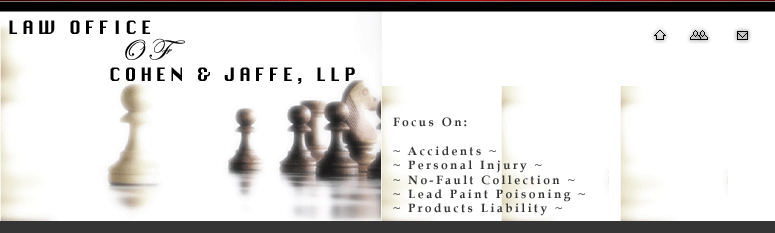
<style>
.page{position:relative;width:775px;height:233px;background:#ffffff}
.page>*{position:absolute;margin:0}
.t1{font:18px "Chicago";letter-spacing:0.2em;color:#000000}
.t2{font:30px "EdwardianScriptITC";letter-spacing:0.2em;color:#000000}
.t3{font:12px "BookAntiqua-Bold";letter-spacing:0.2em;color:#353535}
</style>
<div class="page">
<p class="t1" style="left:9px;top:20px;width:141px;height:14px">LAW OFFICE</p>
<p class="t2" style="left:125px;top:38px;width:60px;height:22px">OF</p>
<p class="t1" style="left:110px;top:67px;width:245px;height:17px">COHEN &amp; JAFFE, LLP</p>
<p class="t3" style="left:393px;top:117px;width:192px;height:99px">Focus On:<br><br>~ Accidents ~ <br>~ Personal Injury ~ <br>~ No-Fault Collection ~<br>~ Lead Paint Poisoning ~ <br>~ Products Liability ~</p>
</div>
